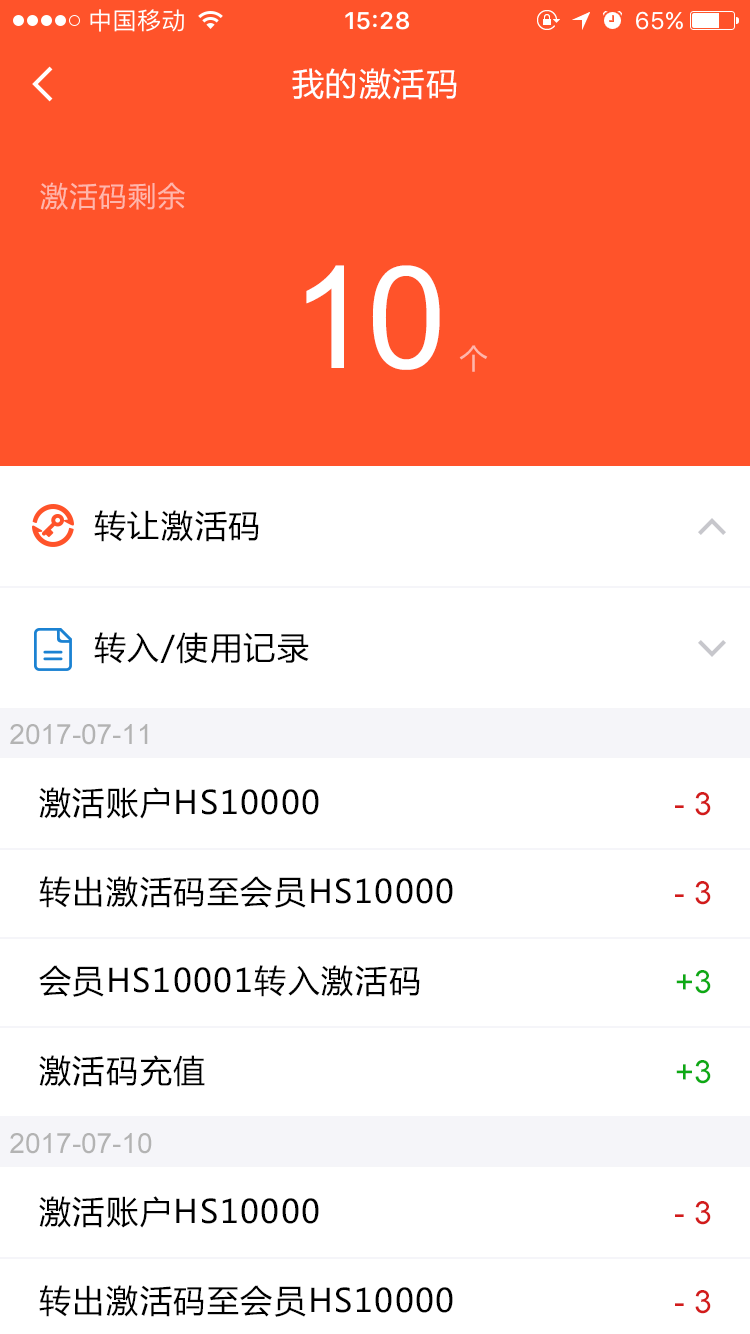
<style>
.page{position:relative;width:750px;height:1334px;background:#ffffff}
.page>*{position:absolute;margin:0}
.t1{font:32px "MicrosoftYaHei";letter-spacing:0.05em;color:#ffffff}
.t2{font:28px "MicrosoftYaHei";letter-spacing:0.05em;color:#ffb6ab}
.t3{font:142.5px "ArialMT";letter-spacing:-0.022em;color:#ffffff}
.t4{font:32px "MicrosoftYaHei";letter-spacing:0.05em;color:#000000}
.t5{font:28px "ArialMT";color:#b3b3b3}
.t6{font:32px "ArialMT";color:#d21b1b}
.t7{font:32px "ArialMT";color:#0da914}
</style>
<div class="page">
<p class="t1" style="left:292px;top:68px;width:165px;height:32px">我的激活码</p>
<p class="t2" style="left:40px;top:182px;width:145px;height:28px">激活码剩余</p>
<p class="t3" style="left:306px;top:265px;width:134px;height:105px">10</p>
<p class="t2" style="left:459px;top:345px;width:29px;height:27px">个</p>
<p class="t4" style="left:94px;top:510px;width:165px;height:32px">转让激活码</p>
<p class="t4" style="left:94px;top:632px;width:215px;height:32px">转入/使用记录</p>
<p class="t5" style="left:10px;top:724px;width:138px;height:21px">2017-07-11</p>
<p class="t4" style="left:39px;top:787px;width:280px;height:32px">激活账户HS10000</p>
<p class="t6" style="left:675px;top:792px;width:36px;height:24px">- 3</p>
<p class="t4" style="left:39px;top:876px;width:414px;height:32px">转出激活码至会员HS10000</p>
<p class="t6" style="left:675px;top:881px;width:36px;height:24px">- 3</p>
<p class="t4" style="left:39px;top:965px;width:381px;height:32px">会员HS10001转入激活码</p>
<p class="t7" style="left:676px;top:970px;width:35px;height:24px">+3</p>
<p class="t4" style="left:39px;top:1055px;width:166px;height:32px">激活码充值</p>
<p class="t7" style="left:676px;top:1060px;width:35px;height:24px">+3</p>
<p class="t5" style="left:10px;top:1133px;width:142px;height:21px">2017-07-10</p>
<p class="t4" style="left:39px;top:1196px;width:280px;height:32px">激活账户HS10000</p>
<p class="t6" style="left:675px;top:1201px;width:36px;height:24px">- 3</p>
<p class="t4" style="left:39px;top:1285px;width:414px;height:32px">转出激活码至会员HS10000</p>
<p class="t6" style="left:675px;top:1290px;width:36px;height:24px">- 3</p>
</div>
